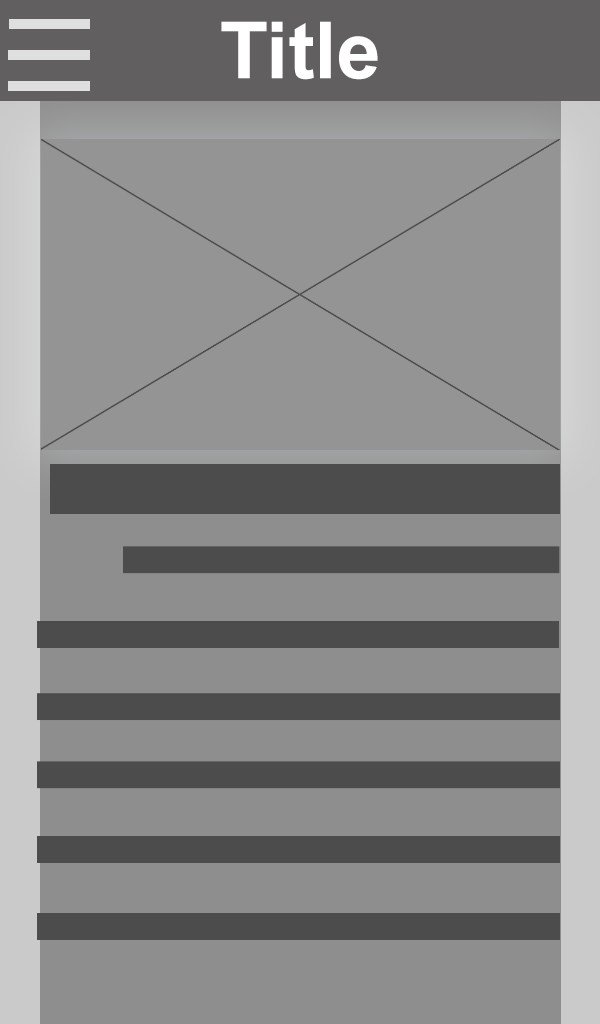
<style>
.page{position:relative;width:600px;height:1024px;background:#8e8e8e}
.page>*{position:absolute;margin:0}
.t1{font:79px "Arial-BoldMT";color:#ffffff}
</style>
<div class="page">
<p class="t1" style="left:221px;top:21px;width:157px;height:59px">Title</p>
</div>
